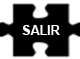
<style>
.page{position:relative;width:80px;height:59px;background:#000000}
.page>*{position:absolute;margin:0}
.t1{font:12.6px "Arial-BoldMT";color:#ffffff}
</style>
<div class="page">
<p class="t1" style="left:22px;top:25px;width:38px;height:10px">SALIR</p>
</div>
